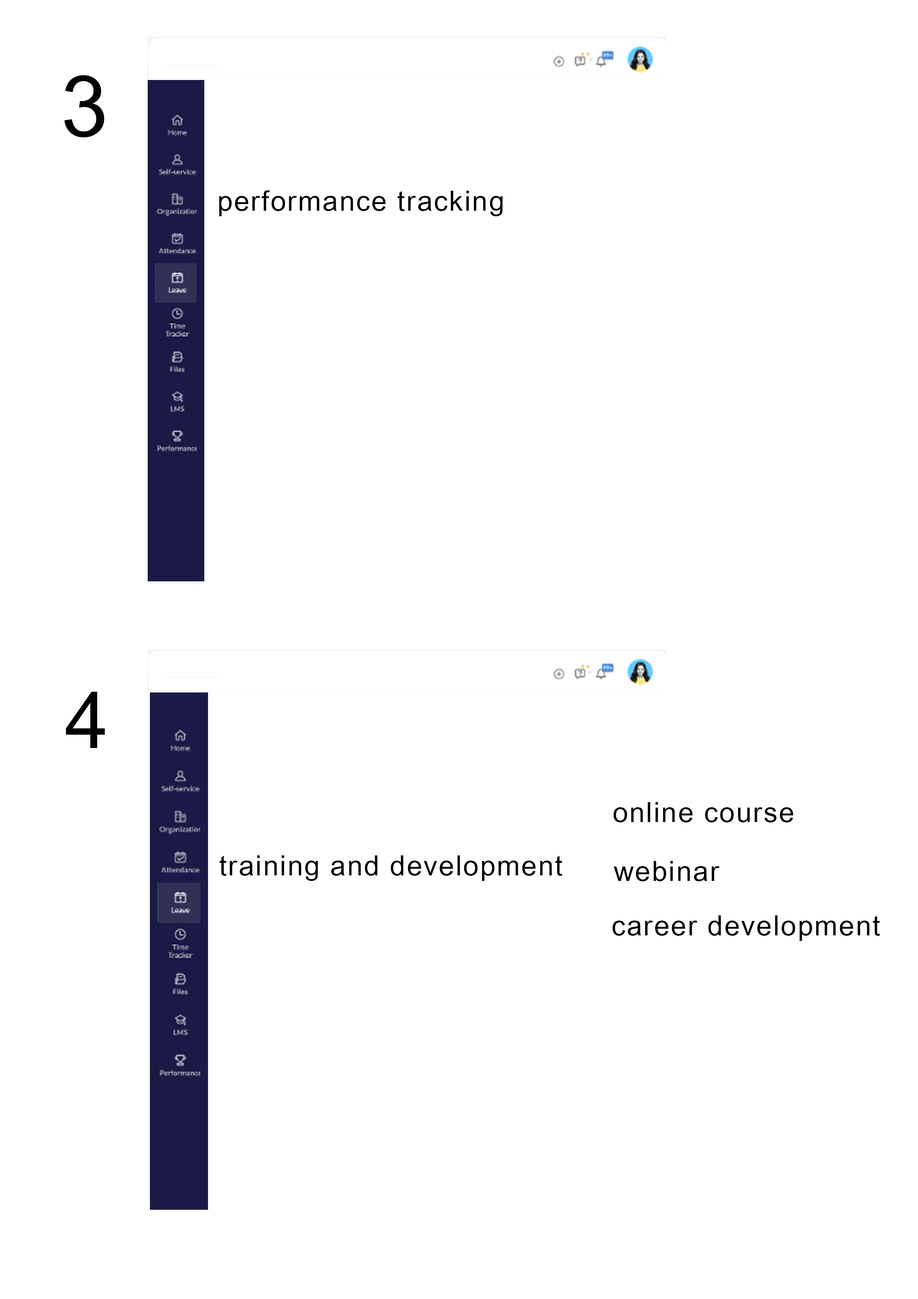
<style>
.page{position:relative;width:918px;height:1299px;background:#ffffff}
.page>*{position:absolute;margin:0}
.t1{font:84.8px "ArialUnicodeMS";letter-spacing:0.05em;color:#000000}
.t2{font:27.8px "ArialUnicodeMS";letter-spacing:0.05em;color:#000000}
.t3{font:78.4px "ArialUnicodeMS";letter-spacing:0.05em;color:#000000}
</style>
<div class="page">
<p class="t1" style="left:64px;top:75px;width:40px;height:62px">3</p>
<p class="t2" style="left:219px;top:190px;width:284px;height:26px">performance tracking</p>
<p class="t3" style="left:66px;top:692px;width:39px;height:56px">4</p>
<p class="t2" style="left:613px;top:802px;width:180px;height:20px">online course</p>
<p class="t2" style="left:220px;top:855px;width:343px;height:26px">training and development</p>
<p class="t2" style="left:614px;top:861px;width:106px;height:20px">webinar</p>
<p class="t2" style="left:612px;top:915px;width:268px;height:26px">career development</p>
</div>
